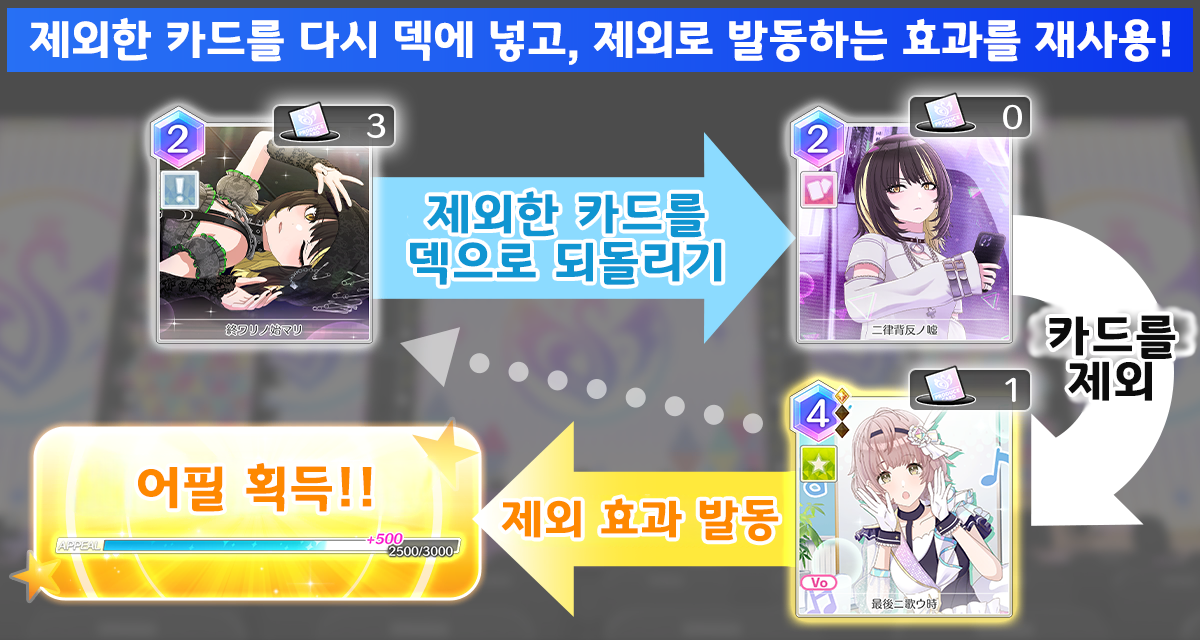
<style>
.page{position:relative;width:1200px;height:640px}
.page>*{position:absolute;margin:0}
.t1{font:45.3px "GyeonggiTitleB";letter-spacing:0.02em;color:#ffffff}
.t2{font:48px/48px "GyeonggiTitleB";letter-spacing:0.05em;color:#1095d1}
.t3{font:48px/45.3px "GyeonggiTitleB";letter-spacing:0.05em;color:#0c0c0c}
.t4{font:50.7px "GyeonggiTitleB";letter-spacing:0.05em;color:#fe8800}
.t5{font:45.3px "GyeonggiTitleB";letter-spacing:0.05em;color:#fe8800}
</style>
<div class="page">
<p class="t1" style="left:29px;top:17px;width:1141px;height:48px">제외한 카드를 다시 덱에 넣고, 제외로 발동하는 효과를 재사용!</p>
<p class="t2" style="left:410px;top:191px;width:312px;height:94px;text-align:center">제외한 카드를<br>덱으로 되돌리기</p>
<p class="t3" style="left:1049px;top:315px;width:127px;height:86px;text-align:center">카드를<br>제외</p>
<p class="t4" style="left:138px;top:463px;width:234px;height:49px">어필 획득!!</p>
<p class="t5" style="left:501px;top:498px;width:278px;height:44px">제외 효과 발동</p>
</div>
